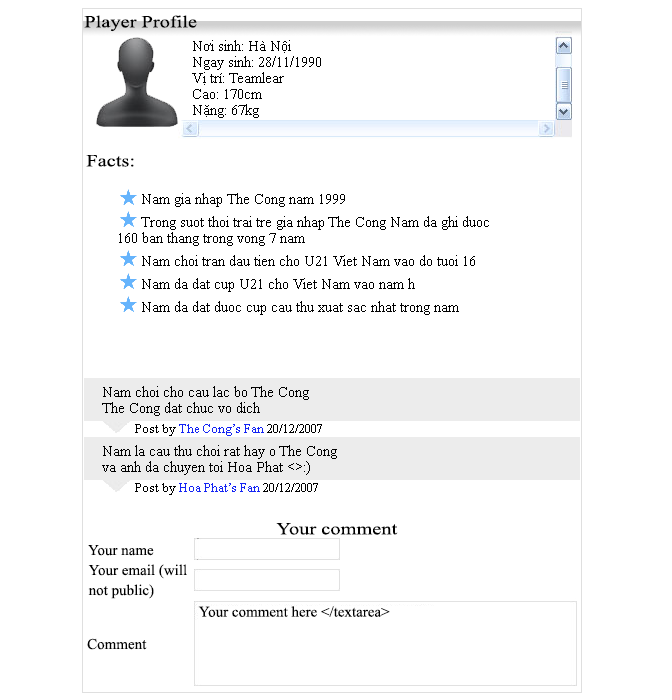
<style>
.page{position:relative;width:672px;height:700px;background:#ffffff}
.page>*{position:absolute;margin:0}
.t1{font:17px "TimesNewRomanPSMT";color:#000000;scale:1.2 1}
.t2{font:15px/16px "TimesNewRomanPSMT";color:#000000}
.t3{font:15px/16px "TimesNewRomanPSMT";color:#000000;scale:1.2 1}
.t4{font:13px "TimesNewRomanPSMT";color:#1424f4}
.t5{font:13px "TimesNewRomanPSMT";color:#000000}
.t6{font:15px/10px "TimesNewRomanPSMT";color:#000000}
.t7{font:15px "TimesNewRomanPSMT";color:#000000}
</style>
<div class="page">
<p class="t1" style="left:84px;top:15px;width:113px;height:17px">Player Profile</p>
<p class="t2" style="left:192px;top:40px;width:129px;height:78px"><span class="t3"><br></span>Nơi sinh: Hà Nội<br>Ngay sinh: 28/11/1990<br>Vị trí: Teamlear<br>Cao: 170cm<br>Nặng: 67kg</p>
<p class="t1" style="left:86px;top:155px;width:48px;height:12px">Facts:</p>
<p class="t2" style="left:119px;top:193px;width:370px;height:122px"><span class="t3"><br></span>      Nam gia nhap The Cong nam 1999<br>      Trong suot thoi trai tre gia nhap The Cong Nam da ghi duoc 160 ban thang trong vong 7 nam<br>      Nam choi tran dau tien cho U21 Viet Nam vao do tuoi 16<br>      Nam da dat cup U21 cho Viet Nam vao nam h<br>      Nam da dat duoc cup cau thu xuat sac nhat trong nam</p>
<p class="t2" style="left:102px;top:386px;width:207px;height:30px">Nam choi cho cau lac bo The Cong<br>The Cong dat chuc vo dich</p>
<p class="t4" style="left:135px;top:424px;width:187px;height:12px"><span class="t5">Post by </span>The Cong’s Fan<span class="t5"> 20/12/2007</span></p>
<p class="t2" style="left:102px;top:445px;width:235px;height:30px">Nam la cau thu choi rat hay o The Cong<br>va anh da chuyen toi Hoa Phat &lt;&gt;:)</p>
<p class="t4" style="left:135px;top:483px;width:183px;height:12px"><span class="t5">Post by </span>Hoa Phat’s Fan<span class="t5"> 20/12/2007</span></p>
<p class="t1" style="left:276px;top:523px;width:122px;height:12px">Your comment</p>
<p class="t6" style="left:88px;top:545px;width:99px;height:54px">Your name<br><br>Your email (will<br><br>not public)</p>
<p class="t7" style="left:198px;top:606px;width:192px;height:11px">Your comment here &lt;/textarea&gt;</p>
<p class="t7" style="left:87px;top:638px;width:60px;height:12px">Comment</p>
</div>
